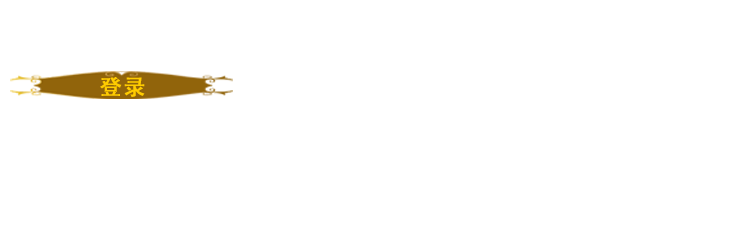
<style>
.page{position:relative;width:729px;height:235px;background:#ffffff}
.page>*{position:absolute;margin:0}
.t1{font:22px "AdobeHeitiStd-Regular";letter-spacing:0.05em;color:#ffcc00;font-weight:bold}
</style>
<div class="page">
<p class="t1" style="left:100px;top:77px;width:45px;height:20px">登录</p>
</div>
